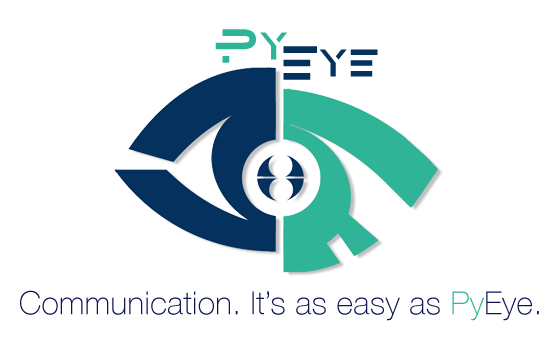
<style>
.page{position:relative;width:558px;height:345px;background:#ffffff}
.page>*{position:absolute;margin:0}
.t1{font:40px "Alternity";letter-spacing:0.01em;color:#2fb497}
.t2{font:40px "Alternity";letter-spacing:0.01em;color:#04315e}
.t3{font:32px "HelveticaNeue-Thin";letter-spacing:0.01em;color:#0e1450}
.t4{font:32px "HelveticaNeue-Thin";letter-spacing:0.01em;color:#2fb497}
</style>
<div class="page">
<p class="t1" style="left:215px;top:29px;width:72px;height:34px">Py</p>
<p class="t2" style="left:283px;top:46px;width:95px;height:34px">Eye</p>
<p class="t3" style="left:20px;top:290px;width:519px;height:31px">Communication. It’s as easy as <span class="t4">Py</span>Eye.</p>
</div>
